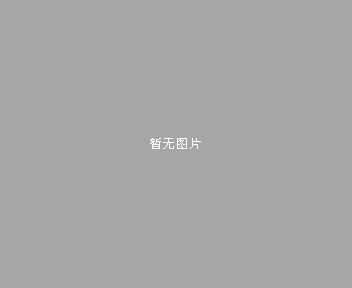
<style>
.page{position:relative;width:352px;height:288px;background:#a6a6a6}
.page>*{position:absolute;margin:0}
.t1{font:12px "SimSun";letter-spacing:0.1em;color:#ffffff}
</style>
<div class="page">
<p class="t1" style="left:150px;top:138px;width:51px;height:11px">暂无图片</p>
</div>
